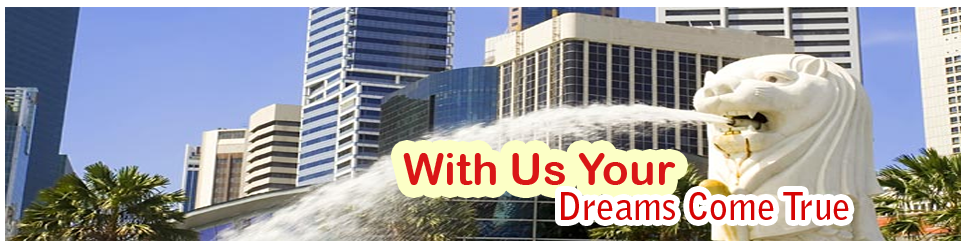
<style>
.page{position:relative;width:970px;height:250px}
.page>*{position:absolute;margin:0}
.t1{font:44px "ArialRoundedMTBold";color:#d91616}
.t2{font:37px "BellGothicStd-Bold";color:#d60505}
</style>
<div class="page">
<p class="t1" style="left:403px;top:153px;width:273px;height:32px">With Us Your</p>
<p class="t2" style="left:561px;top:192px;width:288px;height:28px">Dreams Come True</p>
</div>
